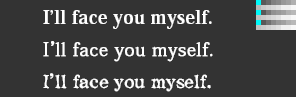
<style>
.page{position:relative;width:296px;height:97px;background:#333333}
.page>*{position:absolute;margin:0}
.t1{font:18px/32px "KozMinPro-Heavy";letter-spacing:0.022em;color:#ffffff}
.t2{font:18px/32px "AdobeFangsongStd-Regular";letter-spacing:0.028em;color:#ffffff;font-weight:bold}
.t3{font:18px/32px "AdobeFangsongStd-Regular";letter-spacing:-0.7em;color:#ffffff;font-weight:bold}
.t4{font:18px/32px "ComicMysteryStd-DB";letter-spacing:-0.006em;color:#ffffff}
</style>
<div class="page">
<p class="t1" style="left:43px;top:10px;width:170px;height:82px">I’ll face you myself.<br><span class="t2">I</span><span class="t3">’</span><span class="t2">ll face you myself.<br></span><span class="t4">I’ll face you myself.</span></p>
</div>
